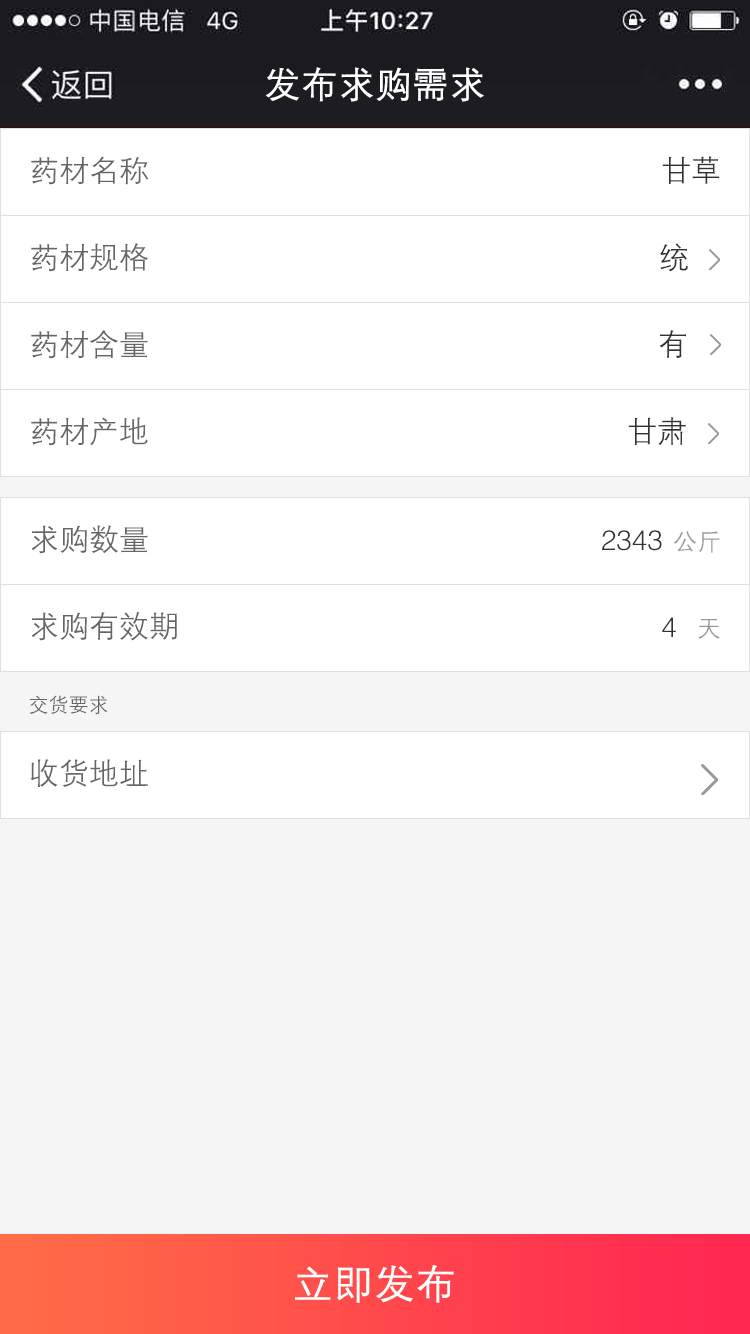
<style>
.page{position:relative;width:750px;height:1334px;background:#ffffff}
.page>*{position:absolute;margin:0}
.t1{font:36px "FZZDXJW--GB1-0";color:#ffffff;font-weight:bold}
.t2{font:30px "FZZDXJW--GB1-0";color:#666666}
.t3{font:30px "FZZDXJW--GB1-0";color:#333333}
.t4{font:28px "FZZDXJW--GB1-0";color:#333333}
.t5{font:24px "FZZDXJW--GB1-0";color:#999999}
.t6{font:20px "FZZDXJW--GB1-0";color:#666666}
.t7{font:40px "FZZDXJW--GB1-0";color:#ffffff;font-weight:bold}
</style>
<div class="page">
<p class="t1" style="left:266px;top:67px;width:218px;height:35px">发布求购需求</p>
<p class="t2" style="left:31px;top:156px;width:118px;height:29px">药材名称</p>
<p class="t3" style="left:662px;top:156px;width:58px;height:28px">甘草</p>
<p class="t2" style="left:31px;top:243px;width:117px;height:29px">药材规格</p>
<p class="t3" style="left:660px;top:243px;width:28px;height:29px">统</p>
<p class="t2" style="left:31px;top:330px;width:117px;height:29px">药材含量</p>
<p class="t3" style="left:659px;top:330px;width:27px;height:28px">有</p>
<p class="t2" style="left:31px;top:417px;width:117px;height:29px">药材产地</p>
<p class="t3" style="left:628px;top:417px;width:58px;height:28px">甘肃</p>
<p class="t2" style="left:31px;top:525px;width:117px;height:29px">求购数量</p>
<p class="t4" style="left:602px;top:530px;width:60px;height:21px">2343</p>
<p class="t5" style="left:674px;top:531px;width:46px;height:22px">公斤</p>
<p class="t2" style="left:31px;top:612px;width:146px;height:29px">求购有效期</p>
<p class="t4" style="left:662px;top:617px;width:14px;height:20px">4</p>
<p class="t5" style="left:698px;top:619px;width:22px;height:20px">天</p>
<p class="t6" style="left:29px;top:695px;width:79px;height:20px">交货要求</p>
<p class="t2" style="left:30px;top:759px;width:118px;height:28px">收货地址</p>
<p class="t7" style="left:295px;top:1265px;width:159px;height:38px">立即发布</p>
</div>
